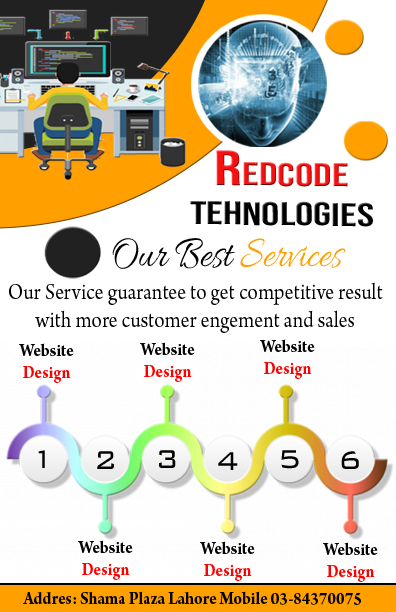
<style>
.page{position:relative;width:396px;height:612px;background:#ffffff}
.page>*{position:absolute;margin:0}
.t1{font:32.9px "BebasNeue-Regular";color:#000000;scale:1.39 1}
.t2{font:49.8px "BebasNeue-Regular";color:#f80f0f;scale:1.39 1}
.t3{font:32.9px "BebasNeue-Regular";color:#f80f0f;scale:1.39 1}
.t4{font:45.5px "Allura-Regular";color:#000000;scale:0.83 1}
.t5{font:45.5px "Allura-Regular";color:#ffa000;scale:0.83 1}
.t6{font:23.9px "ArnoPro-Regular";color:#000000;scale:0.89 1}
.t7{font:18.5px "ArnoPro-Bold";color:#040301;scale:0.91 1}
.t8{font:18.5px "ArnoPro-Bold";color:#ff0000;scale:0.91 1}
.t9{font:34.2px "BankGothicBT-Light";color:#040301;scale:0.94 1}
</style>
<div class="page">
<p class="t1" style="left:190px;top:150px;width:183px;height:77px;text-align:center;rotate:1deg"><span class="t2">R</span><span class="t3">Edcode<br></span>tehnologies</p>
<p class="t4" style="left:112px;top:238px;width:234px;height:31px">Our Best <span class="t5">Services</span></p>
<p class="t6" style="left:9px;top:282px;width:374px;height:51px;text-align:center">Our Service guarantee to get competitive result <br>with more customer engement and sales</p>
<p class="t7" style="left:140px;top:342px;width:55px;height:40px;text-align:center">Website <br><span class="t8">Design</span></p>
<p class="t7" style="left:260px;top:339px;width:55px;height:40px;text-align:center">Website <br><span class="t8">Design</span></p>
<p class="t7" style="left:19px;top:343px;width:55px;height:40px;text-align:center">Website <br><span class="t8">Design</span></p>
<p class="t9" style="left:38px;top:450px;width:7px;height:18px">1</p>
<p class="t9" style="left:97px;top:451px;width:17px;height:18px">2</p>
<p class="t9" style="left:159px;top:450px;width:17px;height:18px">3</p>
<p class="t9" style="left:218px;top:452px;width:20px;height:18px">4</p>
<p class="t9" style="left:281px;top:450px;width:18px;height:19px">5</p>
<p class="t9" style="left:341px;top:451px;width:18px;height:18px">6</p>
<p class="t7" style="left:78px;top:540px;width:55px;height:40px;text-align:center">Website <br><span class="t8">Design</span></p>
<p class="t7" style="left:200px;top:541px;width:55px;height:40px;text-align:center">Website <br><span class="t8">Design</span></p>
<p class="t7" style="left:323px;top:542px;width:55px;height:40px;text-align:center">Website <br><span class="t8">Design</span></p>
<p class="t7" style="left:23px;top:591px;width:338px;height:14px">Addres: Shama Plaza Lahore Mobile 03-84370075</p>
</div>
